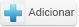
<style>
.page{position:relative;width:79px;height:27px}
.page>*{position:absolute;margin:0}
.t1{font:11px "ArialMT";color:#666666}
</style>
<div class="page">
<p class="t1" style="left:28px;top:8px;width:47px;height:8px">Adicionar</p>
</div>
